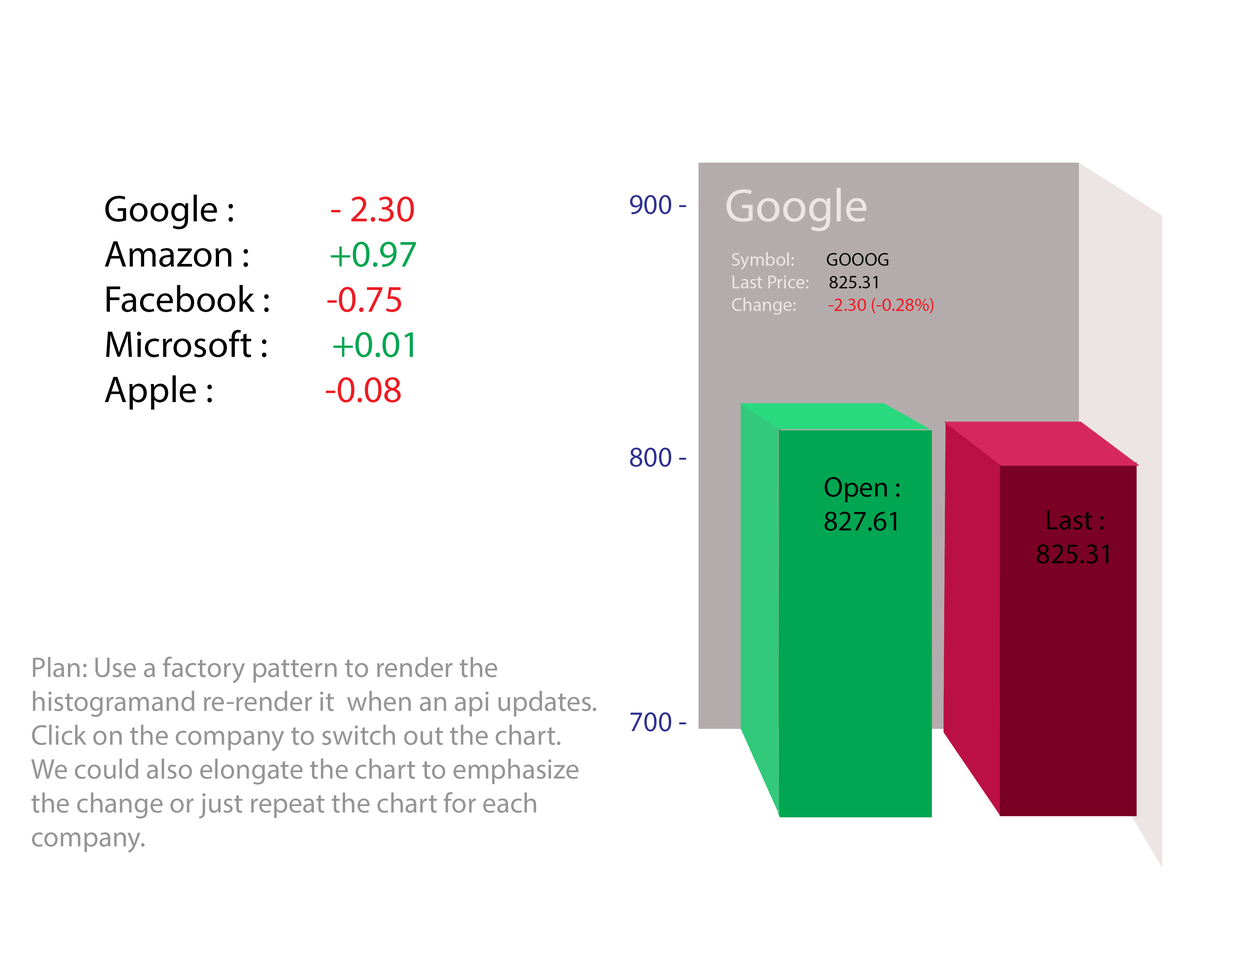
<style>
.page{position:relative;width:1242px;height:960px;background:#ffffff}
.page>*{position:absolute;margin:0}
.t1{font:37.6px "MyriadPro-Regular";color:#000000}
.t2{font:37.6px "MyriadPro-Regular";color:#ed1c24}
.t3{font:37.6px "MyriadPro-Regular";color:#00a651}
.t4{font:28.2px "MyriadPro-Regular";color:#2e3192}
.t5{font:47.1px "MyriadPro-Regular";color:#ede4e4}
.t6{font:4.5px "MyriadPro-Regular";color:#ed1c24}
.t7{font:4.5px "MyriadPro-Regular";color:#ede4e4}
.t8{font:4.5px "MyriadPro-Regular";color:#000000}
.t9{font:28.2px "MyriadPro-Regular";color:#000000}
.t10{font:28.2px "MyriadPro-Regular";color:#959595}
</style>
<div class="page">
<p class="t1" style="left:105px;top:195px;width:311px;height:215px">Google :            <span class="t2">- 2.30<br></span>Amazon :          <span class="t3">+0.97<br></span>Facebook :       <span class="t2">-0.75<br></span>Microsoft :        <span class="t3">+0.01<br></span>Apple :              <span class="t2">-0.08</span></p>
<p class="t4" style="left:630px;top:195px;width:56px;height:19px">900 -</p>
<p class="t5" style="left:727px;top:188px;width:140px;height:44px">Google</p>
<p class="t6" style="left:732px;top:252px;width:202px;height:63px"><span class="t7">Symbol:       </span><span class="t8"> GOOOG<br></span><span class="t7">Last Price:     </span><span class="t8">825.31<br></span><span class="t7">Change:       </span> -2.30 (-0.28%)</p>
<p class="t4" style="left:630px;top:448px;width:56px;height:19px">800 -</p>
<p class="t9" style="left:825px;top:477px;width:75px;height:54px">Open :<br>827.61</p>
<p class="t9" style="left:1037px;top:510px;width:72px;height:54px;text-align:center">Last :<br>825.31</p>
<p class="t10" style="left:31px;top:657px;width:565px;height:196px">Plan: Use a factory pattern to render the <br>histogramand re-render it  when an api updates.<br>Click on the company to switch out the chart.<br>We could also elongate the chart to emphasize <br>the change or just repeat the chart for each<br>company.</p>
<p class="t4" style="left:631px;top:712px;width:55px;height:19px">700 -</p>
</div>
